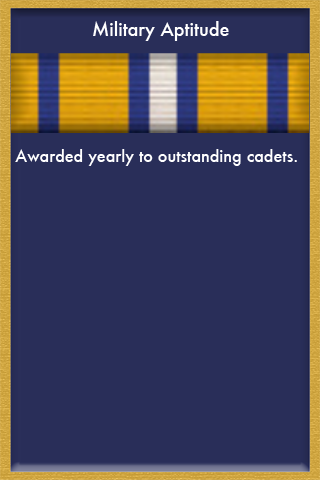
<style>
.page{position:relative;width:320px;height:480px;background:#292e59}
.page>*{position:absolute;margin:0}
.t1{font:18px "Futura-Medium";color:#ffffff}
.t2{font:16px "Futura-Medium";color:#ffffff}
</style>
<div class="page">
<p class="t1" style="left:93px;top:21px;width:136px;height:20px">Military Aptitude</p>
<p class="t2" style="left:15px;top:149px;width:282px;height:17px">Awarded yearly to outstanding cadets.</p>
</div>
